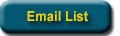
<style>
.page{position:relative;width:120px;height:36px;background:#035871}
.page>*{position:absolute;margin:0}
.t1{font:14px "Arial-BoldMT";color:#f3cf08;scale:0.93 1}
</style>
<div class="page">
<p class="t1" style="left:27px;top:11px;width:61px;height:11px">Email List</p>
</div>
